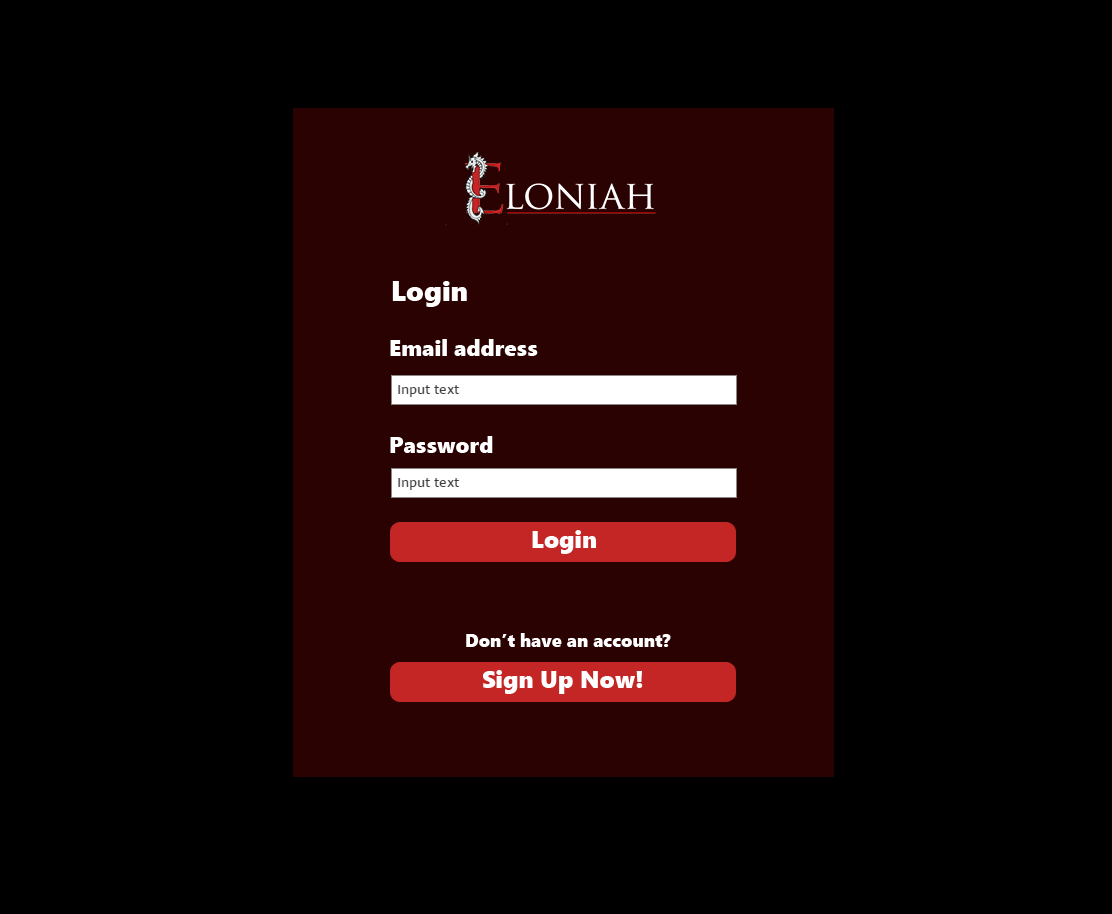
<style>
.page{position:relative;width:1112px;height:914px;background:#000000}
.page>*{position:absolute;margin:0}
.t1{font:28px "SegoeUIBlack";color:#ffffff}
.t2{font:22px "SegoeUIBlack";color:#ffffff}
.t3{font:24px "SegoeUIBlack";color:#ffffff}
.t4{font:18px "SegoeUIBlack";color:#ffffff}
</style>
<div class="page">
<p class="t1" style="left:392px;top:281px;width:75px;height:26px">Login</p>
<p class="t2" style="left:390px;top:339px;width:148px;height:17px">Email address</p>
<p class="t2" style="left:390px;top:436px;width:103px;height:17px">Password</p>
<p class="t3" style="left:532px;top:530px;width:64px;height:24px">Login</p>
<p class="t4" style="left:466px;top:633px;width:205px;height:14px">Don’t have an account?</p>
<p class="t3" style="left:483px;top:670px;width:160px;height:24px">Sign Up Now!</p>
</div>
